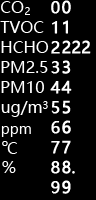
<style>
.page{position:relative;width:96px;height:200px;background:#000000}
.page>*{position:absolute;margin:0}
.t1{font:16px/20px "MicrosoftYaHei";color:#ffffff}
.t2{font:16px/20px "MicrosoftYaHei";color:#ffffff;font-weight:bold}
.t3{font:18px "MicrosoftYaHei";color:#ffffff}
.t4{font:16px "MicrosoftYaHei";color:#ffffff}
.t5{font:24px "MicrosoftYaHei";color:#ffffff}
.t6{font:10px "MicrosoftYaHei";color:#ffffff}
</style>
<div class="page">
<p class="t1" style="left:0px;top:1px;width:49px;height:92px">CO<br>TVOC<br>HCHO<br>PM2.5<br>PM10</p>
<p class="t2" style="left:50px;top:1px;width:11px;height:193px">0<br>1<br>2<br>3<br>4<br>5<br>6<br>7<br>8<br>9</p>
<p class="t2" style="left:61px;top:0px;width:30px;height:194px">0<br>1<br>222<br>3<br>4<br>5<br>6<br>7<br>8.<br>9</p>
<p class="t3" style="left:25px;top:7px;width:5px;height:8px">2</p>
<p class="t4" style="left:1px;top:101px;width:41px;height:16px">ug/m</p>
<p class="t3" style="left:43px;top:101px;width:5px;height:8px">3</p>
<p class="t5" style="left:1px;top:126px;width:30px;height:11px">ppm</p>
<p class="t6" style="left:2px;top:141px;width:6px;height:5px">o</p>
<p class="t4" style="left:7px;top:142px;width:10px;height:12px">C</p>
<p class="t4" style="left:2px;top:161px;width:14px;height:12px">%</p>
</div>
